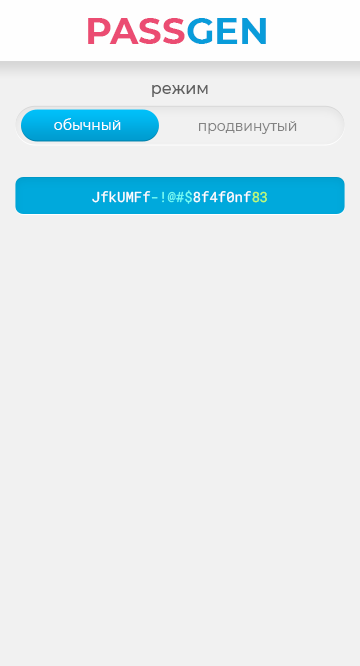
<style>
.page{position:relative;width:360px;height:666px;background:#f1f1f1}
.page>*{position:absolute;margin:0}
.t1{font:37px "Montserrat-Bold";color:#eb4c72}
.t2{font:37px "Montserrat-Bold";color:#099cda}
.t3{font:16px "Montserrat-Medium";color:#5f5f5f}
.t4{font:14px "Montserrat-Regular";color:#ffffff}
.t5{font:14px "Montserrat-Regular";color:#838383}
.t6{font:14px "RobotoMono-Regular";color:#ffffff}
.t7{font:14px "RobotoMono-Regular";color:#76fff4}
.t8{font:14px "RobotoMono-Regular";color:#bfff6b}
</style>
<div class="page">
<p class="t1" style="left:88px;top:18px;width:178px;height:26px">PASS<span class="t2">GEN</span></p>
<p class="t3" style="left:152px;top:85px;width:56px;height:12px">режим</p>
<p class="t4" style="left:54px;top:118px;width:67px;height:12px">обычный</p>
<p class="t5" style="left:199px;top:121px;width:98px;height:13px">продвинутый</p>
<p class="t6" style="left:92px;top:190px;width:175px;height:14px">JfkUMFf<span class="t7">-!@#$</span>8f4f0nf<span class="t8">83</span></p>
</div>
